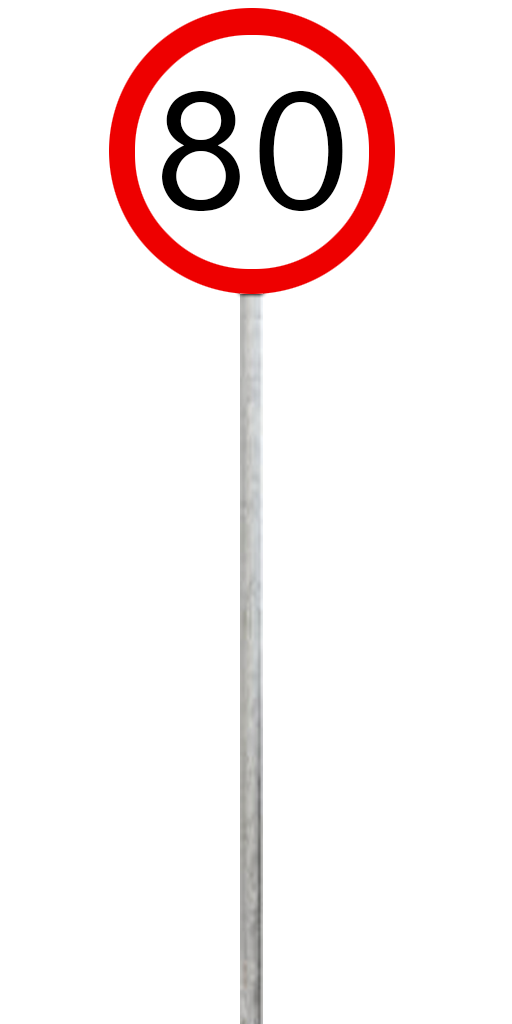
<style>
.page{position:relative;width:512px;height:1024px;background:#ffffff}
.page>*{position:absolute;margin:0}
.t1{font:150px "Sathu";color:#000000}
</style>
<div class="page">
<p class="t1" style="left:162px;top:91px;width:181px;height:120px">80</p>
</div>
